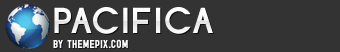
<style>
.page{position:relative;width:340px;height:52px;background:#333333}
.page>*{position:absolute;margin:0}
.t1{font:36px "Opificio-Bold";letter-spacing:0.075em;color:#ffffff;text-transform:uppercase}
.t2{font:12px "Sugo";letter-spacing:0.025em;color:#ffffff;text-transform:uppercase}
</style>
<div class="page">
<p class="t1" style="left:54px;top:7px;width:159px;height:27px">Pacifica</p>
<p class="t2" style="left:53px;top:39px;width:75px;height:9px">by themepix.com</p>
</div>
